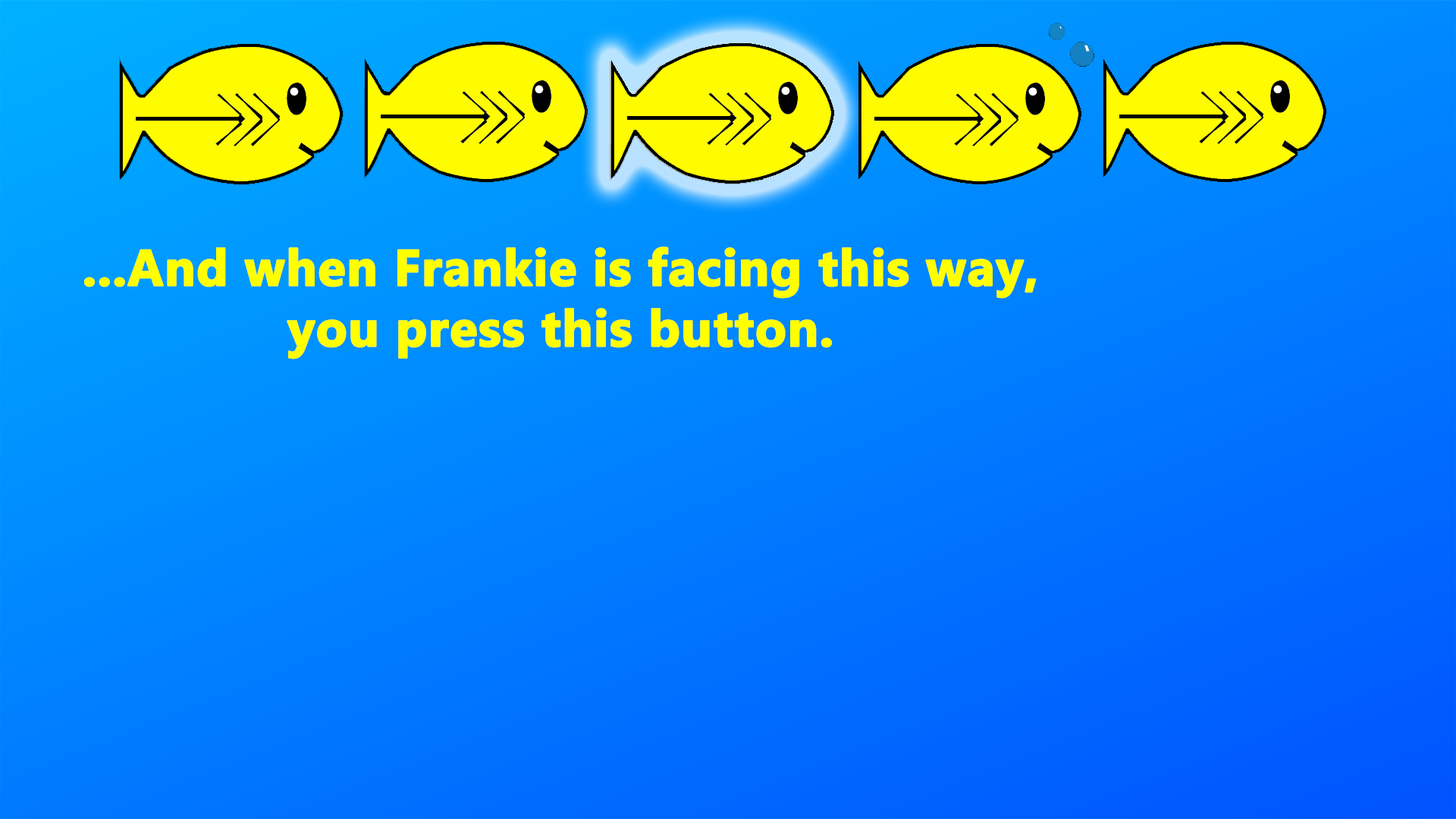
<style>
.page{position:relative;width:1456px;height:819px}
.page>*{position:absolute;margin:0}
.t1{font:50.6px "MyanmarText-Bold";color:#ffff00;font-weight:bold}
</style>
<div class="page">
<p class="t1" style="left:84px;top:246px;width:953px;height:113px;text-align:center">...And when Frankie is facing this way,<br>you press this button.</p>
</div>
